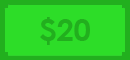
<style>
.page{position:relative;width:130px;height:60px;background:#2ddd28}
.page>*{position:absolute;margin:0}
.t1{font:31.1px "CenturyGothic-Bold";color:#22af1e}
</style>
<div class="page">
<p class="t1" style="left:40px;top:17px;width:50px;height:28px">$20</p>
</div>
